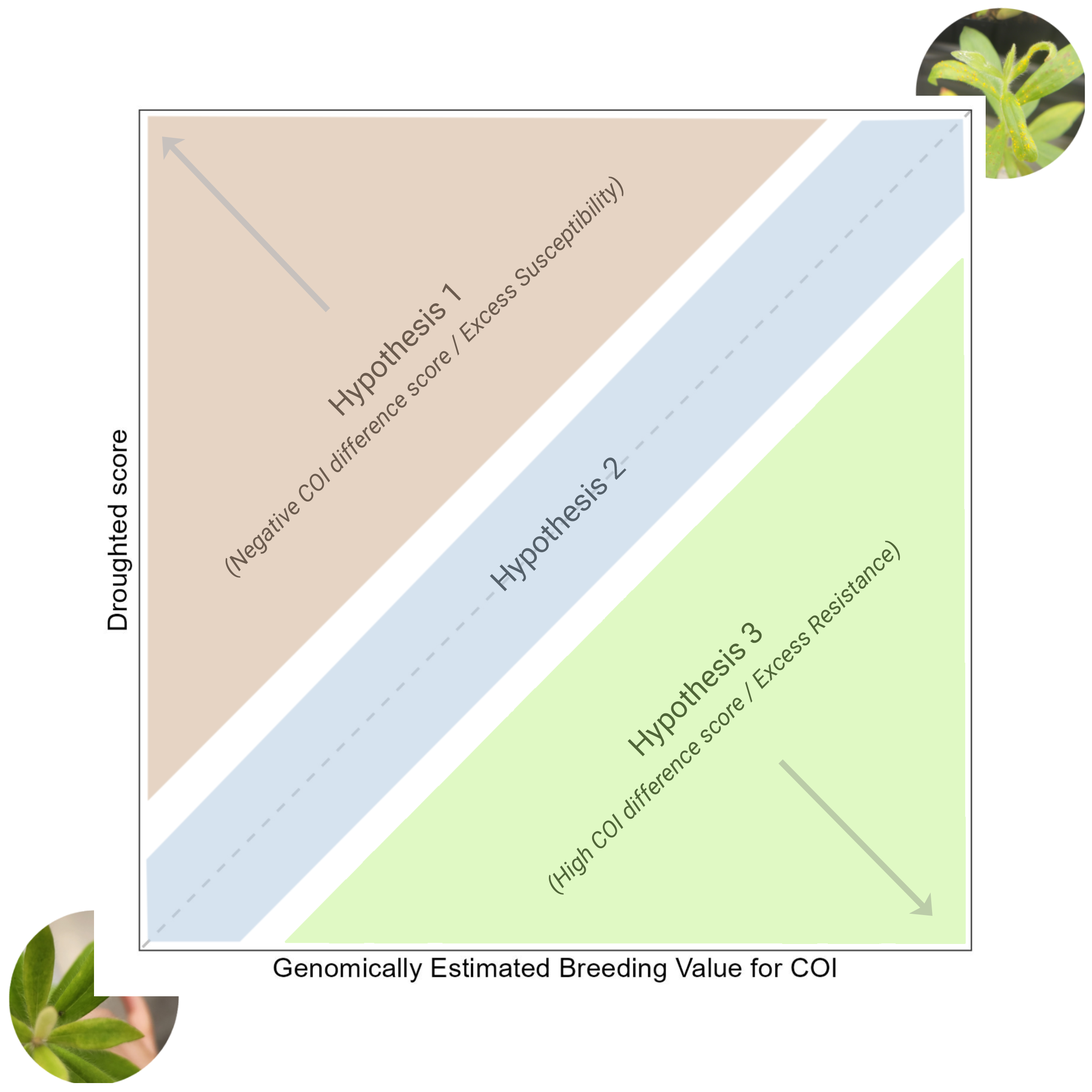
<style>
.page{position:relative;width:1092px;height:1092px;background:#ffffff}
.page>*{position:absolute;margin:0}
.t1{font:23.4px "Roboto-Italic";color:#6b5b4e}
.t2{font:30.2px "Roboto-Regular";color:#6b5b4e}
.t3{font:30.2px "Roboto-Regular";color:#54606a}
.t4{font:23.4px "Roboto-Italic";color:#4f6537}
.t5{font:30.2px "Roboto-Regular";color:#4f6537}
</style>
<div class="page">
<p class="t1" style="left:225px;top:177px;width:399px;height:401px;text-align:center;rotate:-45deg"><span class="t2">Hypothesis 1<br><br></span>(Negative COI difference score / Excess Susceptibility)</p>
<p class="t3" style="left:490px;top:457px;width:137px;height:134px;rotate:-45deg">Hypothesis 2</p>
<p class="t4" style="left:549px;top:541px;width:351px;height:354px;text-align:center;rotate:-45deg"><span class="t5">Hypothesis 3<br><br></span>(High COI difference score / Excess Resistance)</p>
</div>
